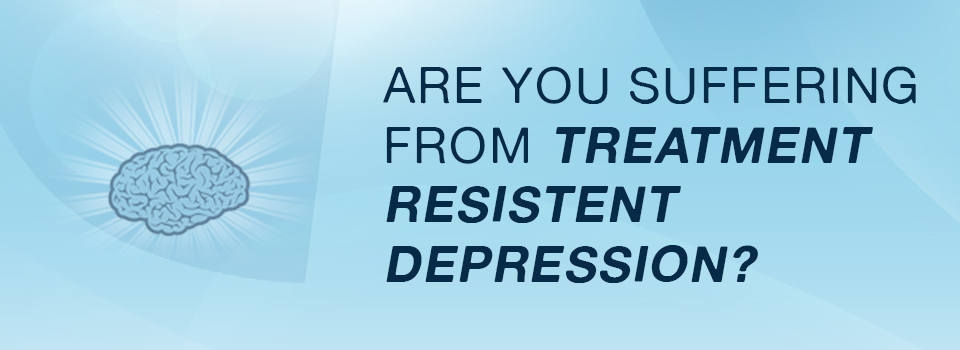
<style>
.page{position:relative;width:960px;height:350px}
.page>*{position:absolute;margin:0}
.t1{font:49.8px "AlteHaasGrotesk_Bold";letter-spacing:0.04em;color:#062b48;font-style:italic}
.t2{font:49.8px "AlteHaasGrotesk";letter-spacing:0.04em;color:#062b48}
</style>
<div class="page">
<p class="t1" style="left:383px;top:66px;width:533px;height:217px"><span class="t2">ARE YOU SUFFERING<br>FROM </span>TREATMENT<br>RESISTENT <br>DEPRESSION?</p>
</div>
